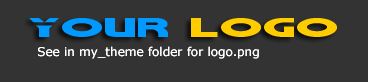
<style>
.page{position:relative;width:368px;height:82px;background:#333333}
.page>*{position:absolute;margin:0}
.t1{font:36px "Galant";color:#0099ff}
.t2{font:36px "Galant";color:#ffcc00}
.t3{font:12px "Verdana";color:#ffffff}
</style>
<div class="page">
<p class="t1" style="left:29px;top:18px;width:139px;height:19px">Your</p>
<p class="t2" style="left:191px;top:18px;width:146px;height:19px">LOGO</p>
<p class="t3" style="left:38px;top:46px;width:221px;height:13px">See in my_theme folder for logo.png</p>
</div>
